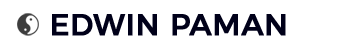
<style>
.page{position:relative;width:350px;height:49px;background:#ffffff}
.page>*{position:absolute;margin:0}
.t1{font:30px "Montserrat-Regular";color:#000019;font-weight:bold}
</style>
<div class="page">
<p class="t1" style="left:52px;top:14px;width:234px;height:22px">EDWIN PAMAN</p>
</div>
